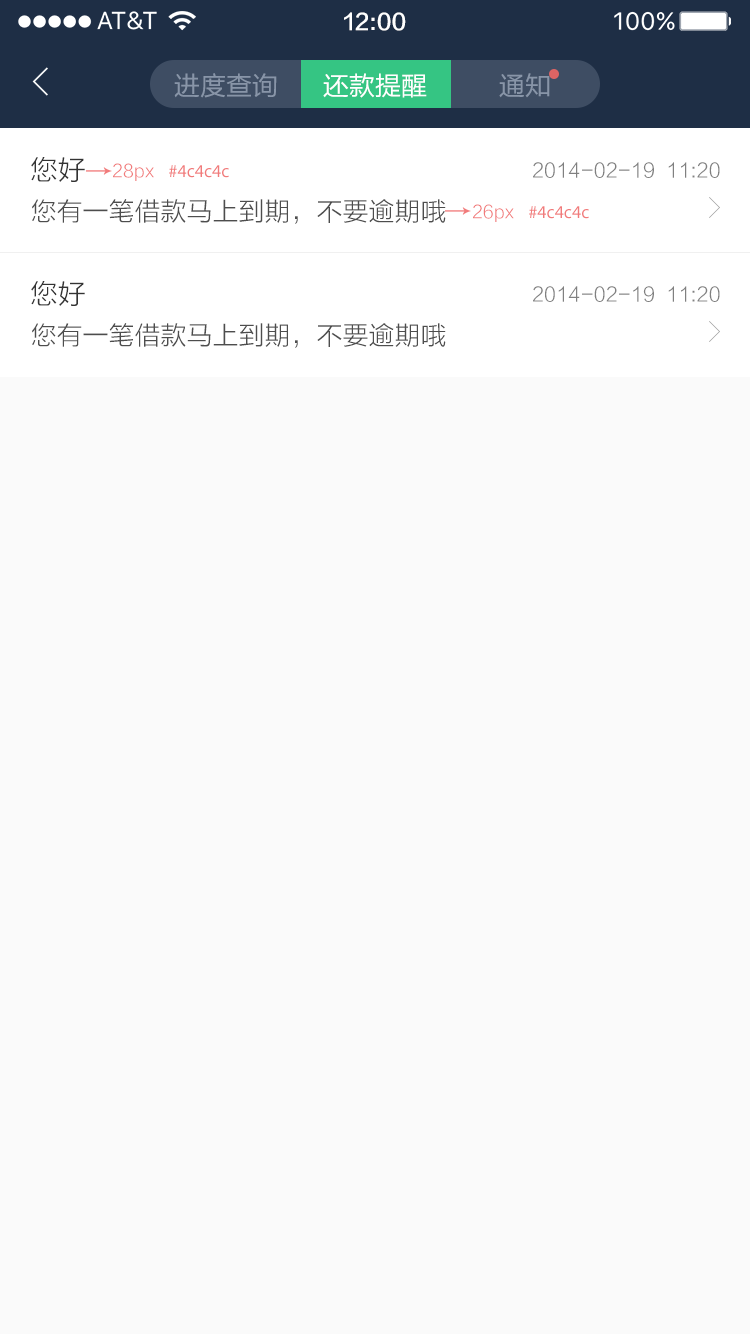
<style>
.page{position:relative;width:750px;height:1334px;background:#fafafa}
.page>*{position:absolute;margin:0}
.t1{font:22px "FZLTZHK--GBK1-0";color:#ffffff}
.t2{font:26px "FZLTHJW--GB1-0";color:#8895a8}
.t3{font:26px "FZLTHJW--GB1-0";color:#ffffff}
.t4{font:28px "FZLTXHK";color:#333333}
.t5{font:18px "MyriadPro-Regular";color:#f17b7b}
.t6{font:18px "FZLTXHK";color:#f17b7b}
.t7{font:20px "FZLTXHK";color:#808080}
.t8{font:26px "FZLTXHK";color:#4d4d4d}
</style>
<div class="page">
<p class="t1" style="left:344px;top:12px;width:62px;height:19px">12:00</p>
<p class="t2" style="left:174px;top:73px;width:103px;height:25px">进度查询</p>
<p class="t3" style="left:323px;top:73px;width:104px;height:25px">还款提醒</p>
<p class="t2" style="left:499px;top:73px;width:51px;height:25px">通知</p>
<p class="t4" style="left:31px;top:157px;width:54px;height:25px">您好</p>
<p class="t5" style="left:113px;top:163px;width:116px;height:18px"><span class="t6">28px  </span> #4c4c4c</p>
<p class="t7" style="left:533px;top:162px;width:187px;height:16px">2014-02-19  11:20</p>
<p class="t8" style="left:32px;top:199px;width:414px;height:25px">您有一笔借款马上到期，不要逾期哦</p>
<p class="t5" style="left:473px;top:204px;width:116px;height:18px"><span class="t6">26px  </span> #4c4c4c</p>
<p class="t4" style="left:31px;top:281px;width:54px;height:25px">您好</p>
<p class="t7" style="left:533px;top:286px;width:187px;height:16px">2014-02-19  11:20</p>
<p class="t8" style="left:32px;top:323px;width:414px;height:25px">您有一笔借款马上到期，不要逾期哦</p>
</div>
